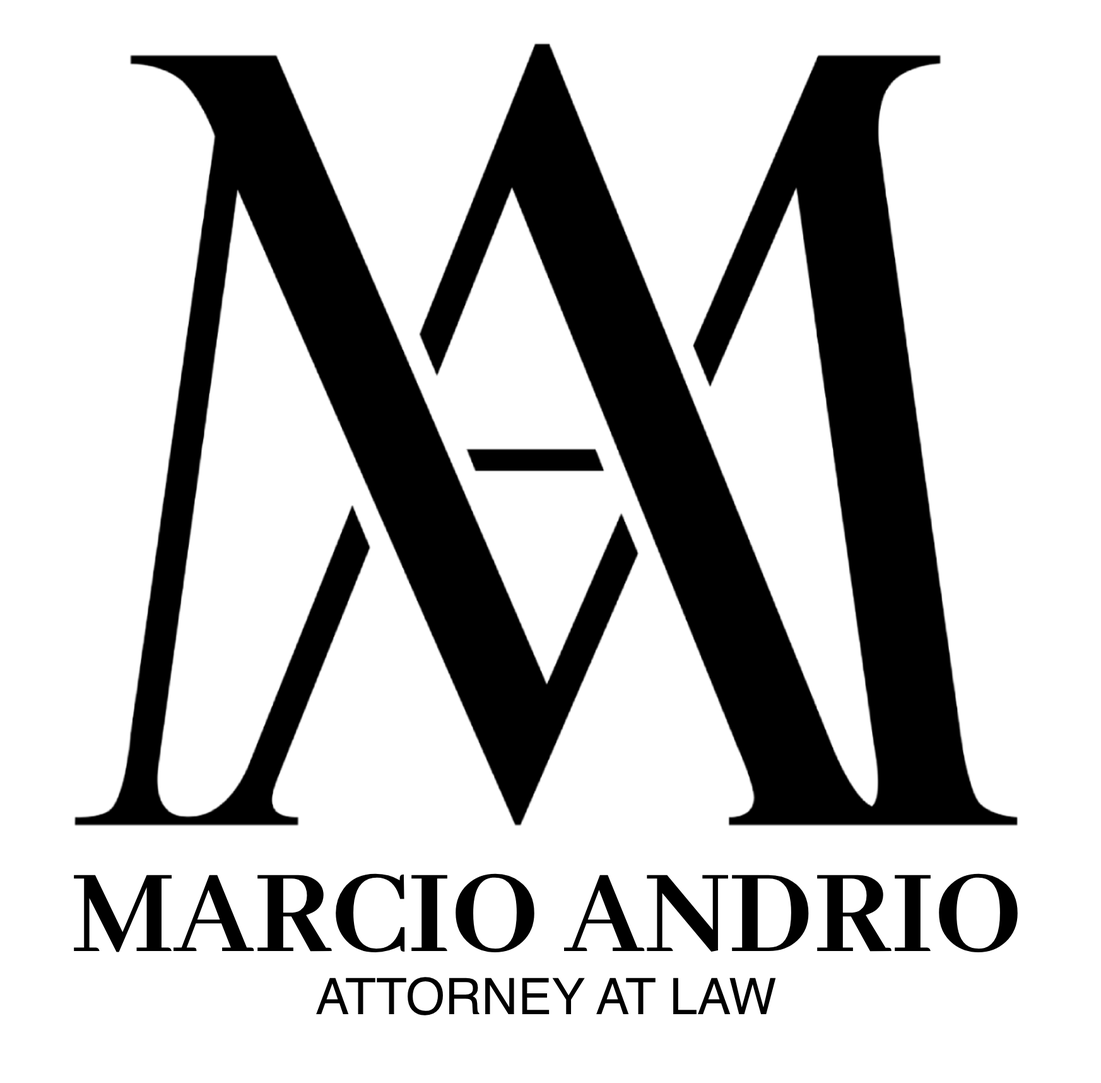
<style>
.page{position:relative;width:1101px;height:1083px;background:#ffffff}
.page>*{position:absolute;margin:0}
.t1{font:129.4px "AbhayaLibre-Bold";color:#000000}
.t2{font:50.4px "Helvetica";color:#000000}
</style>
<div class="page">
<p class="t1" style="left:74px;top:873px;width:944px;height:79px">MARCIO ANDRIO</p>
<p class="t2" style="left:316px;top:977px;width:460px;height:38px">ATTORNEY AT LAW</p>
</div>
